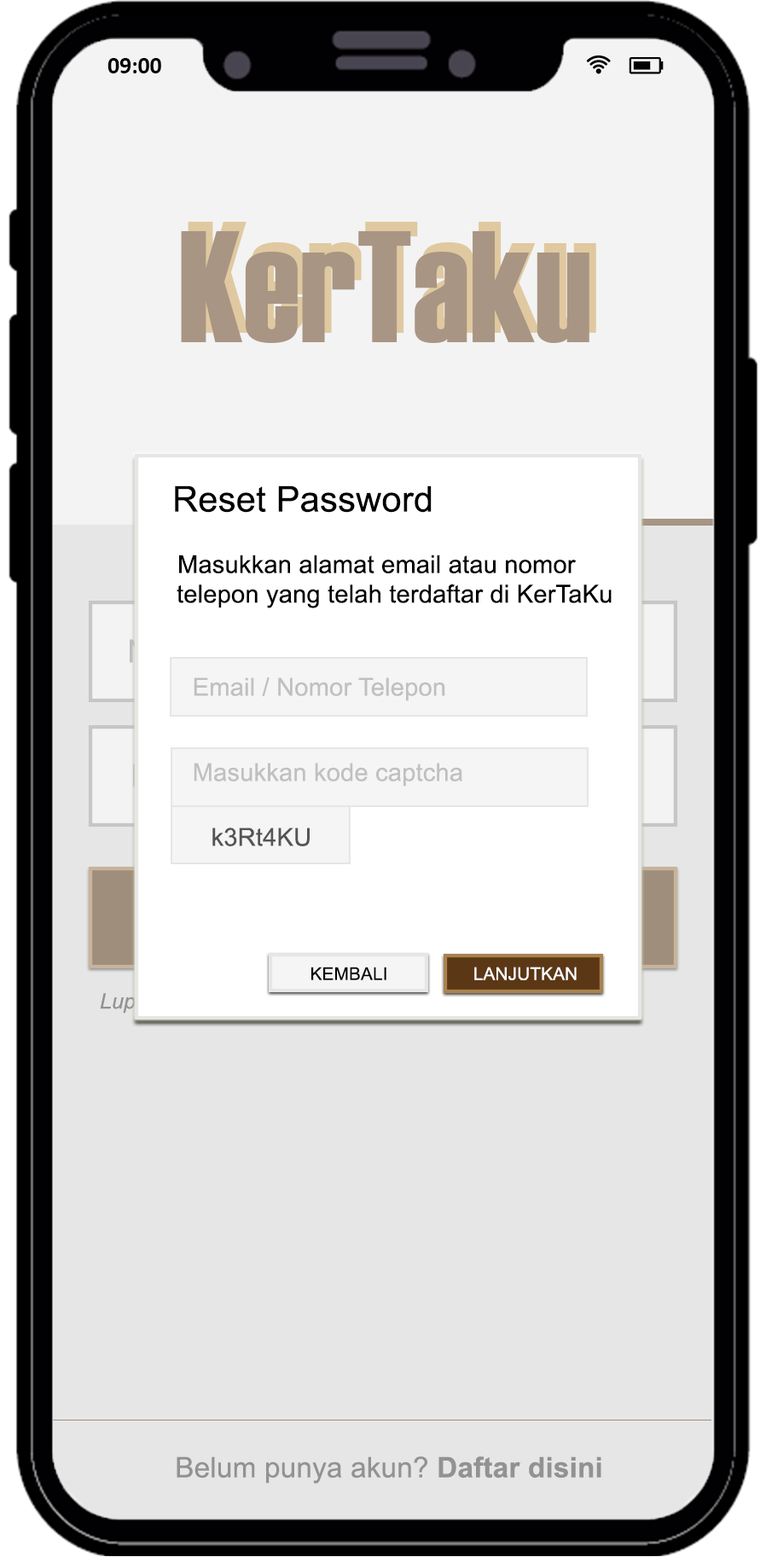
<style>
.page{position:relative;width:766px;height:1557px;background:#e6e6e6}
.page>*{position:absolute;margin:0}
.t1{font:23.6px "Calibri-Bold";color:#000000}
.t2{font:35.5px "ArialMT";letter-spacing:0.005em;color:#000000}
.t3{font:24.9px "ArialMT";letter-spacing:0.005em;color:#000000}
.t4{font:24.9px "ArialMT";letter-spacing:0.005em;color:#c0c0c0}
.t5{font:24.9px "ArialMT";letter-spacing:0.005em;color:#545454}
.t6{font:17.8px "ArialMT";letter-spacing:0.005em;color:#000000}
.t7{font:17.8px "ArialMT";letter-spacing:0.005em;color:#ffffff}
.t8{font:28.4px "ArialMT";letter-spacing:0.005em;color:#929292}
.t9{font:28.4px "Arial-BoldMT";letter-spacing:0.005em;color:#929292}
</style>
<div class="page">
<p class="t1" style="left:107px;top:58px;width:54px;height:15px">09:00</p>
<p class="t2" style="left:175px;top:485px;width:257px;height:28px">Reset Password</p>
<p class="t3" style="left:179px;top:554px;width:397px;height:19px">Masukkan alamat email atau nomor</p>
<p class="t3" style="left:177px;top:584px;width:435px;height:24px">telepon yang telah terdaftar di KerTaKu</p>
<p class="t4" style="left:194px;top:677px;width:251px;height:24px">Email / Nomor Telepon</p>
<p class="t4" style="left:194px;top:763px;width:268px;height:23px">Masukkan kode captcha</p>
<p class="t5" style="left:212px;top:827px;width:98px;height:19px">k3Rt4KU</p>
<p class="t6" style="left:311px;top:966px;width:75px;height:14px">KEMBALI</p>
<p class="t7" style="left:474px;top:966px;width:103px;height:14px">LANJUTKAN</p>
<p class="t8" style="left:177px;top:1456px;width:424px;height:27px">Belum punya akun? <span class="t9">Daftar disini</span></p>
</div>
